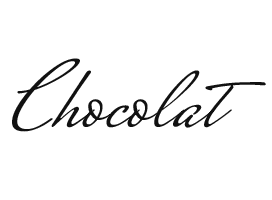
<style>
.page{position:relative;width:272px;height:200px;background:#ffffff}
.page>*{position:absolute;margin:0}
.t1{font:96px "MrsSaintDelafield-Regular";color:#111111}
</style>
<div class="page">
<p class="t1" style="left:12px;top:58px;width:254px;height:74px">Chocolat</p>
</div>
